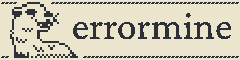
<style>
.page{position:relative;width:240px;height:60px;background:#ebe5ce}
.page>*{position:absolute;margin:0}
.t1{font:40px "CrimsonPro-Regular";color:#2e3037}
</style>
<div class="page">
<p class="t1" style="left:73px;top:12px;width:159px;height:28px">errormine</p>
</div>
